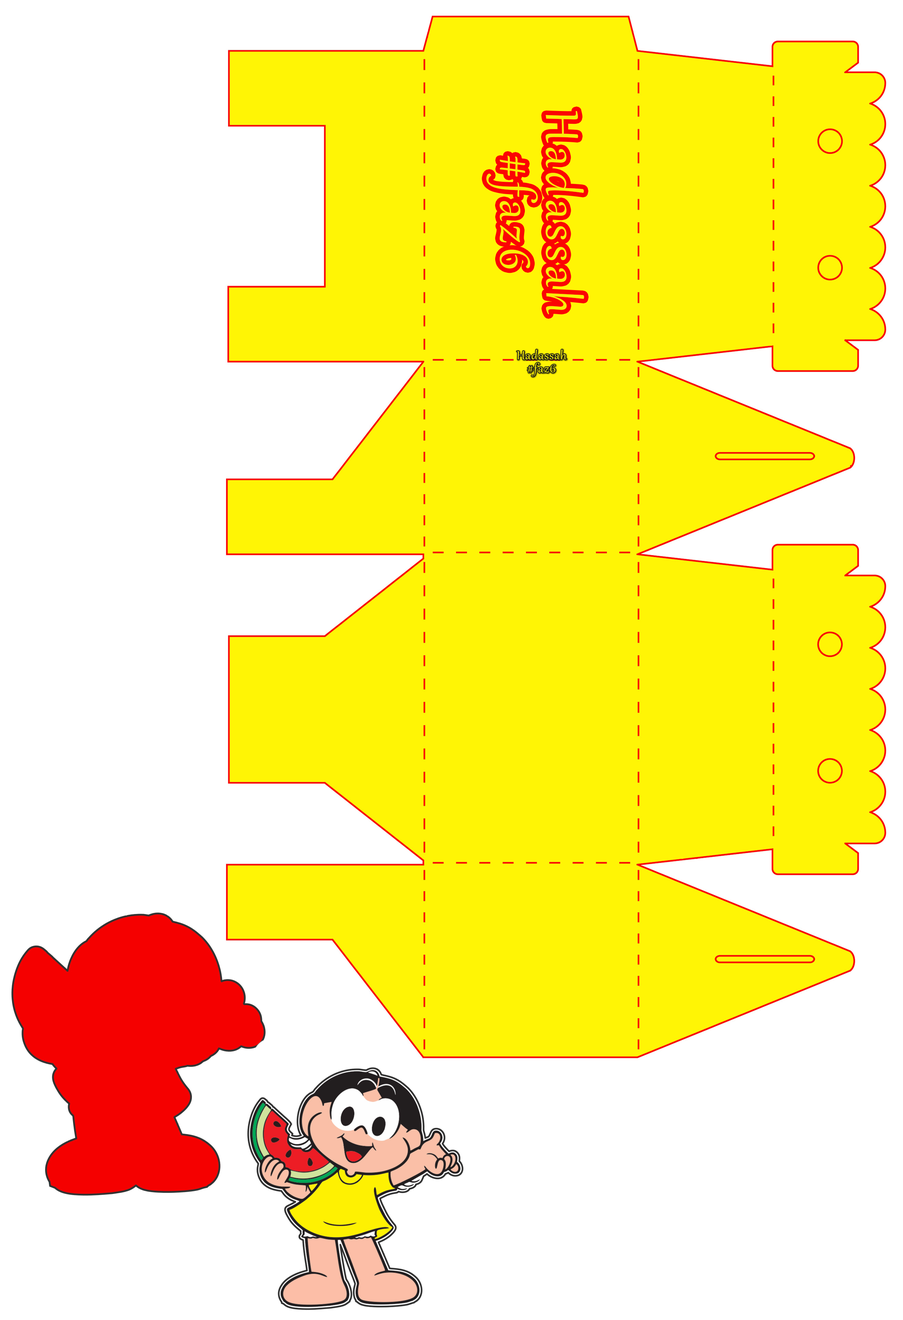
<style>
.page{position:relative;width:903px;height:1320px;background:#ffffff}
.page>*{position:absolute;margin:0}
.t1{font:56.5px/46.1px "Gabriola";letter-spacing:0.08em;color:#f8ef07}
</style>
<div class="page">
<p class="t1" style="left:486px;top:111px;width:98px;height:204px;text-align:center;rotate:90deg">Hadassah<br>#faz6</p>
</div>
